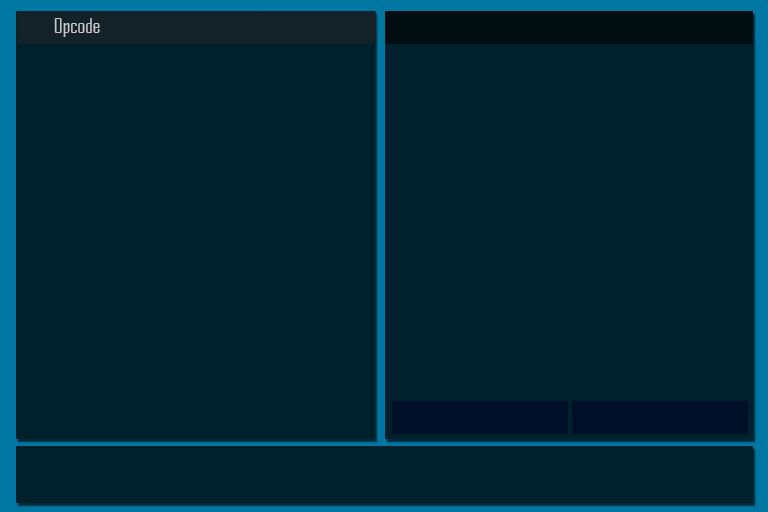
<style>
.page{position:relative;width:768px;height:512px;background:#00212c}
.page>*{position:absolute;margin:0}
.t1{font:20px "AgencyFB-Reg";color:#c8c8c8}
</style>
<div class="page">
<p class="t1" style="left:54px;top:18px;width:46px;height:19px">Opcode</p>
</div>
